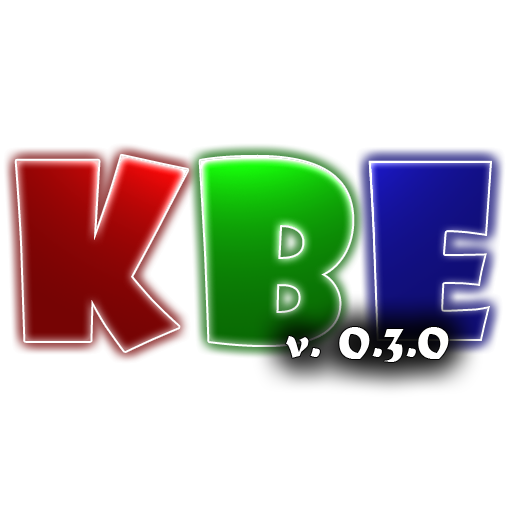
<style>
.page{position:relative;width:512px;height:512px;background:#ffffff}
.page>*{position:absolute;margin:0}
.t1{font:240px "ShowcardGothic-Reg"}
</style>
<div class="page">
<p class="t1" style="left:16px;top:155px;width:172px;height:196px">K</p>
<p class="t1" style="left:200px;top:156px;width:153px;height:189px">B</p>
<p class="t1" style="left:368px;top:160px;width:124px;height:181px">E</p>
</div>
